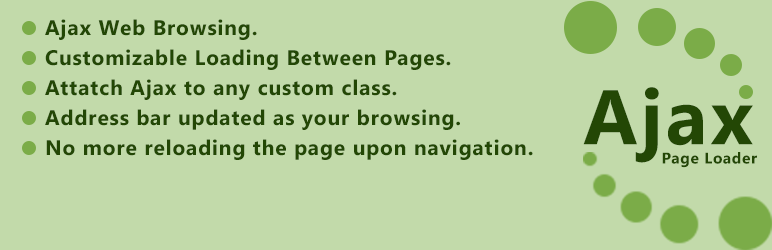
<style>
.page{position:relative;width:772px;height:250px;background:#c2daaa}
.page>*{position:absolute;margin:0}
.t1{font:21px/30px "Gadugi-Bold";letter-spacing:0.04em;color:#234705}
.t2{font:77.3px "Gadugi-Bold";letter-spacing:0.04em;color:#234705}
.t3{font:15.5px "Gadugi-Bold";letter-spacing:0.04em;color:#234705}
</style>
<div class="page">
<p class="t1" style="left:45px;top:19px;width:488px;height:141px">Ajax Web Browsing.<br>Customizable Loading Between Pages.<br>Attatch Ajax to any custom class.<br>Address bar updated as your browsing.<br>No more reloading the page upon navigation.</p>
<p class="t2" style="left:583px;top:87px;width:170px;height:76px">Ajax</p>
<p class="t3" style="left:662px;top:152px;width:95px;height:16px">Page Loader</p>
</div>
